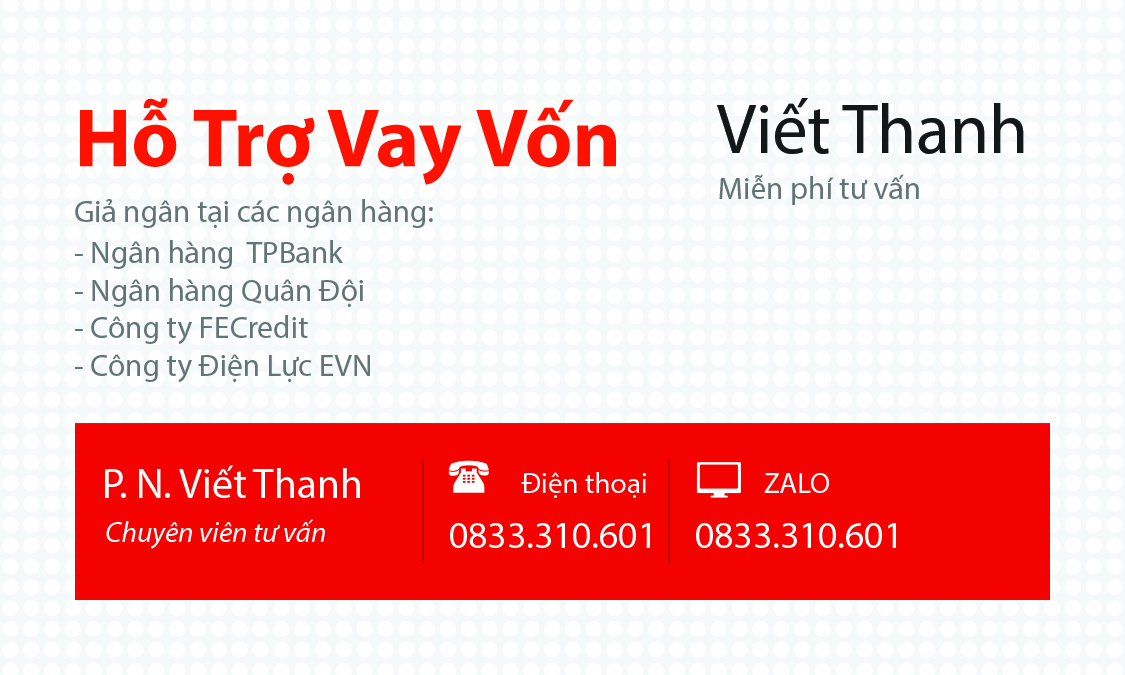
<style>
.page{position:relative;width:1125px;height:675px;background:#ffffff}
.page>*{position:absolute;margin:0}
.t1{font:83.3px "MyriadPro-Bold";color:#ff1100}
.t2{font:70.8px "MyriadPro-Regular";color:#131718}
.t3{font:31.2px "MyriadPro-Regular";color:#627576}
.t4{font:41.7px "MyriadPro-Regular";color:#ffffff}
.t5{font:29.2px "MyriadPro-Regular";color:#ffffff}
.t6{font:29.2px "MyriadPro-It";color:#ffffff}
.t7{font:37.5px "MyriadPro-Regular";color:#ffffff}
</style>
<div class="page">
<p class="t1" style="left:80px;top:98px;width:536px;height:87px">Hỗ Trợ Vay Vốn</p>
<p class="t2" style="left:717px;top:98px;width:307px;height:56px">Viết Thanh</p>
<p class="t3" style="left:719px;top:174px;width:200px;height:31px">Miễn phí tư vấn</p>
<p class="t3" style="left:75px;top:199px;width:358px;height:29px">Giả ngân tại các ngân hàng:</p>
<p class="t3" style="left:75px;top:240px;width:295px;height:142px">- Ngân hàng  TPBank<br>- Ngân hàng Quân Đội<br>- Công ty FECredit<br>- Công ty Điện Lực EVN</p>
<p class="t4" style="left:105px;top:465px;width:255px;height:33px">P. N. Viết Thanh</p>
<p class="t5" style="left:521px;top:472px;width:125px;height:26px">Điện thoại</p>
<p class="t5" style="left:764px;top:473px;width:65px;height:20px">ZALO</p>
<p class="t6" style="left:106px;top:519px;width:219px;height:30px">Chuyên viên tư vấn</p>
<p class="t7" style="left:450px;top:523px;width:200px;height:25px">0833.310.601</p>
<p class="t7" style="left:696px;top:523px;width:200px;height:25px">0833.310.601</p>
</div>
